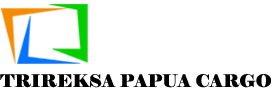
<style>
.page{position:relative;width:272px;height:91px;background:#ffffff}
.page>*{position:absolute;margin:0}
.t1{font:17.3px "Elephant-Regular";color:#000000;scale:1.04 1}
</style>
<div class="page">
<p class="t1" style="left:0px;top:74px;width:271px;height:14px">TRIREKSA PAPUA CARGO</p>
</div>
